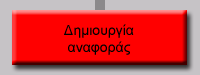
<style>
.page{position:relative;width:200px;height:75px;background:#ff0000}
.page>*{position:absolute;margin:0}
.t1{font:14px "ArialMT";color:#000000}
</style>
<div class="page">
<p class="t1" style="left:64px;top:24px;width:70px;height:31px;text-align:center">Δημιουργία<br>αναφοράς</p>
</div>
